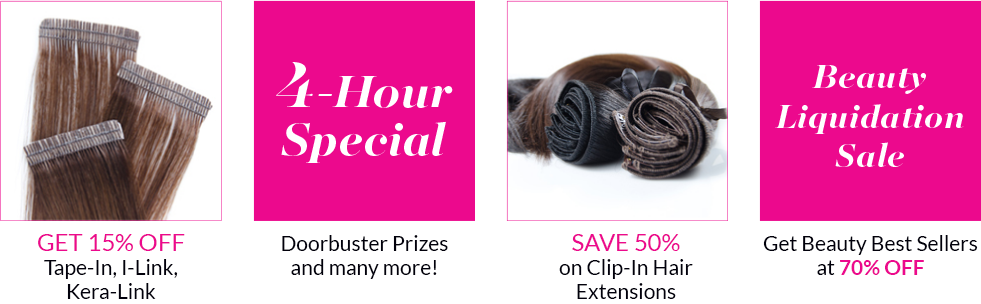
<style>
.page{position:relative;width:981px;height:304px;background:#ffffff}
.page>*{position:absolute;margin:0}
.t1{font:50.3px/48px "MajestiBanner-BoldItalic";color:#ffffff}
.t2{font:72px/48px "MajestiBanner-MediumItalic";color:#ffffff}
.t3{font:36px/39.8px "MajestiBanner-BoldItalic";color:#ffffff}
.t4{font:21px/24px "Lato-Regular";color:#01000b}
.t5{font:24px/24px "Lato-Regular";color:#ec098d}
.t6{font:21px/24px "Lato-Bold";color:#ec098d}
</style>
<div class="page">
<p class="t1" style="left:276px;top:62px;width:177px;height:101px;text-align:center"><span class="t2">4</span>-Hour<br>Special</p>
<p class="t3" style="left:775px;top:65px;width:189px;height:102px;text-align:center">Beauty<br>Liquidation<br>Sale</p>
<p class="t4" style="left:38px;top:234px;width:147px;height:65px;text-align:center"><span class="t5">GET 15% OFF<br></span>Tape-In, I-Link,<br>Kera-Link</p>
<p class="t4" style="left:282px;top:235px;width:166px;height:44px;text-align:center">Doorbuster Prizes<br>and many more!</p>
<p class="t4" style="left:559px;top:234px;width:134px;height:65px;text-align:center"><span class="t5">SAVE 50%<br></span>on Clip-In Hair<br>Extensions</p>
<p class="t4" style="left:763px;top:235px;width:215px;height:40px;text-align:center">Get Beauty Best Sellers<br>at<span class="t6"> 70% OFF</span></p>
</div>
